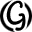
<style>
.page{position:relative;width:32px;height:32px;background:#ffffff}
.page>*{position:absolute;margin:0}
.t1{font:24.6px "Pacifico-Regular";color:#000000;scale:1.04 1}
</style>
<div class="page">
<p class="t1" style="left:6px;top:0px;width:20px;height:31px;rotate:-11deg">G</p>
</div>
